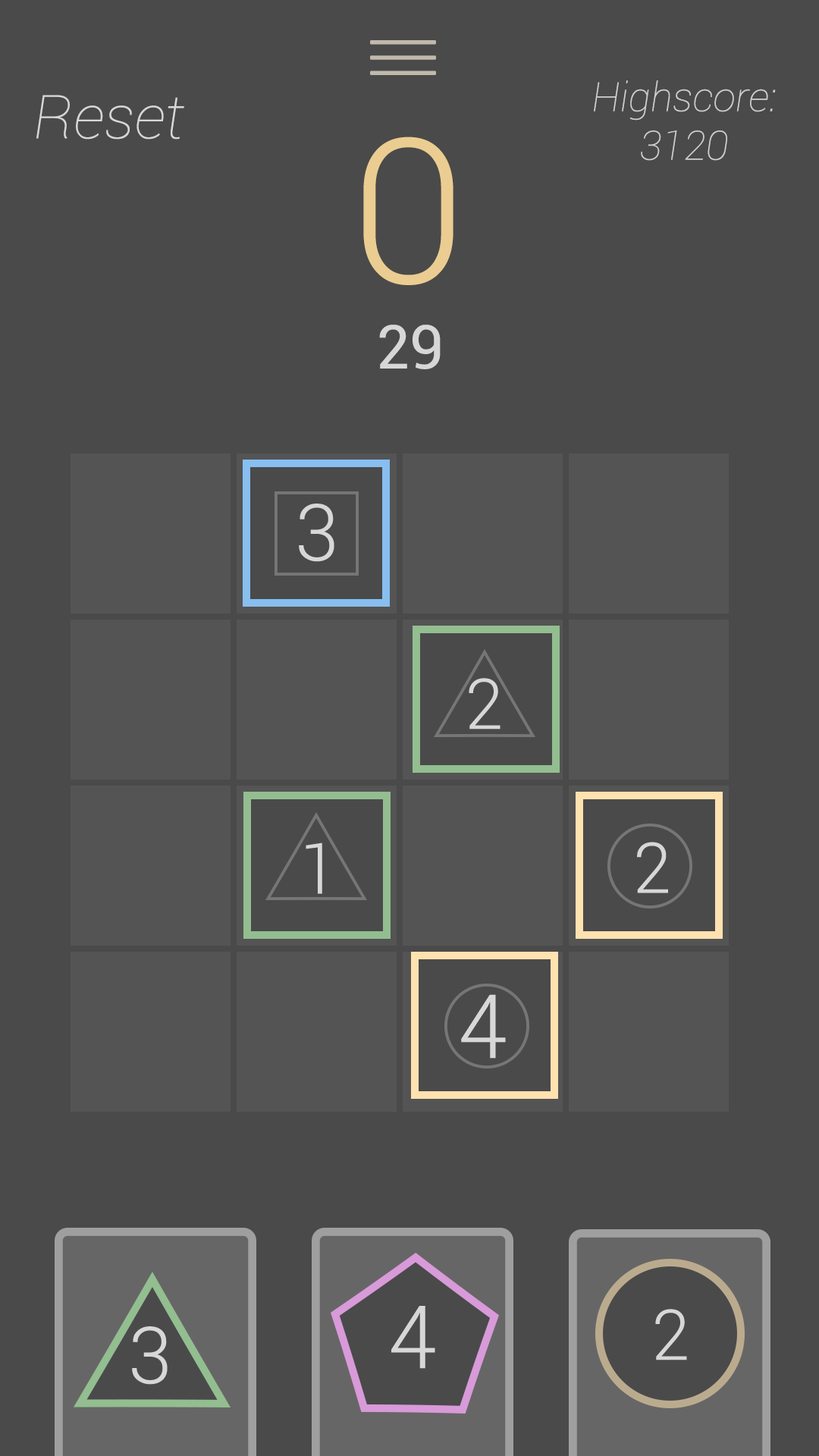
<style>
.page{position:relative;width:819px;height:1456px;background:#4a4a4a}
.page>*{position:absolute;margin:0}
.t1{font:40.4px "Roboto-ThinItalic";color:#cdcdcd}
.t2{font:60.7px "Roboto-ThinItalic";color:#d7d7d7}
.t3{font:202.2px "Roboto-Light";color:#ebcd92}
.t4{font:60.7px "Roboto-Regular";color:#d7d7d7}
.t5{font:78.8px "Roboto-Light";color:#d7d7d7}
.t6{font:70.2px "Roboto-Light";color:#d7d7d7}
.t7{font:88.8px "Roboto-Light";color:#d7d7d7}
.t8{font:87.4px "Roboto-Light";color:#d7d7d7}
</style>
<div class="page">
<p class="t1" style="left:594px;top:80px;width:182px;height:81px;text-align:center">Highscore:<br>3120</p>
<p class="t2" style="left:36px;top:95px;width:148px;height:45px">Reset</p>
<p class="t3" style="left:363px;top:136px;width:90px;height:149px">0</p>
<p class="t4" style="left:379px;top:325px;width:62px;height:44px">29</p>
<p class="t5" style="left:299px;top:504px;width:35px;height:58px">3</p>
<p class="t6" style="left:469px;top:678px;width:31px;height:52px">2</p>
<p class="t6" style="left:306px;top:842px;width:16px;height:52px">1</p>
<p class="t6" style="left:637px;top:842px;width:31px;height:51px">2</p>
<p class="t7" style="left:461px;top:994px;width:45px;height:65px">4</p>
<p class="t8" style="left:391px;top:1306px;width:44px;height:63px">4</p>
<p class="t6" style="left:655px;top:1309px;width:32px;height:51px">2</p>
<p class="t5" style="left:132px;top:1326px;width:36px;height:59px">3</p>
</div>
